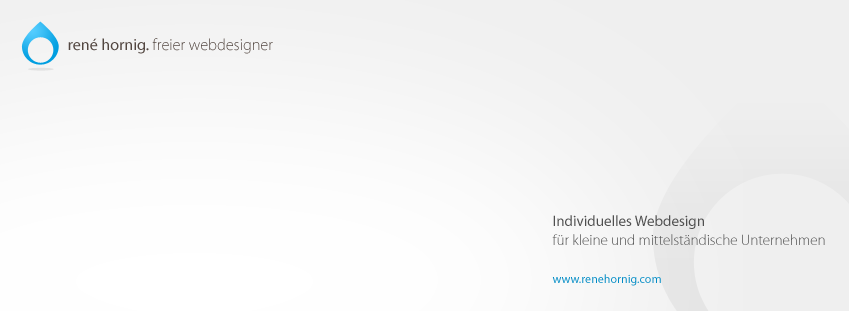
<style>
.page{position:relative;width:849px;height:311px}
.page>*{position:absolute;margin:0}
.t1{font:16.1px "MyriadPro-Light";color:#534741}
.t2{font:16.1px "MyriadPro-Regular";color:#534741}
.t3{font:15px/19px "MyriadPro-Light";color:#4f4f4f}
.t4{font:15px/19px "MyriadPro-Regular";color:#4f4f4f}
.t5{font:12px/19px "MyriadPro-Regular";color:#008bc5}
</style>
<div class="page">
<p class="t1" style="left:68px;top:38px;width:205px;height:16px"><span class="t2">rené hornig. </span>freier webdesigner</p>
<p class="t3" style="left:552px;top:215px;width:273px;height:71px"><span class="t4">Individuelles Webdesign<br></span>für kleine und mittelständische Unternehmen<br><br><span class="t5">www.renehornig.com</span></p>
</div>
